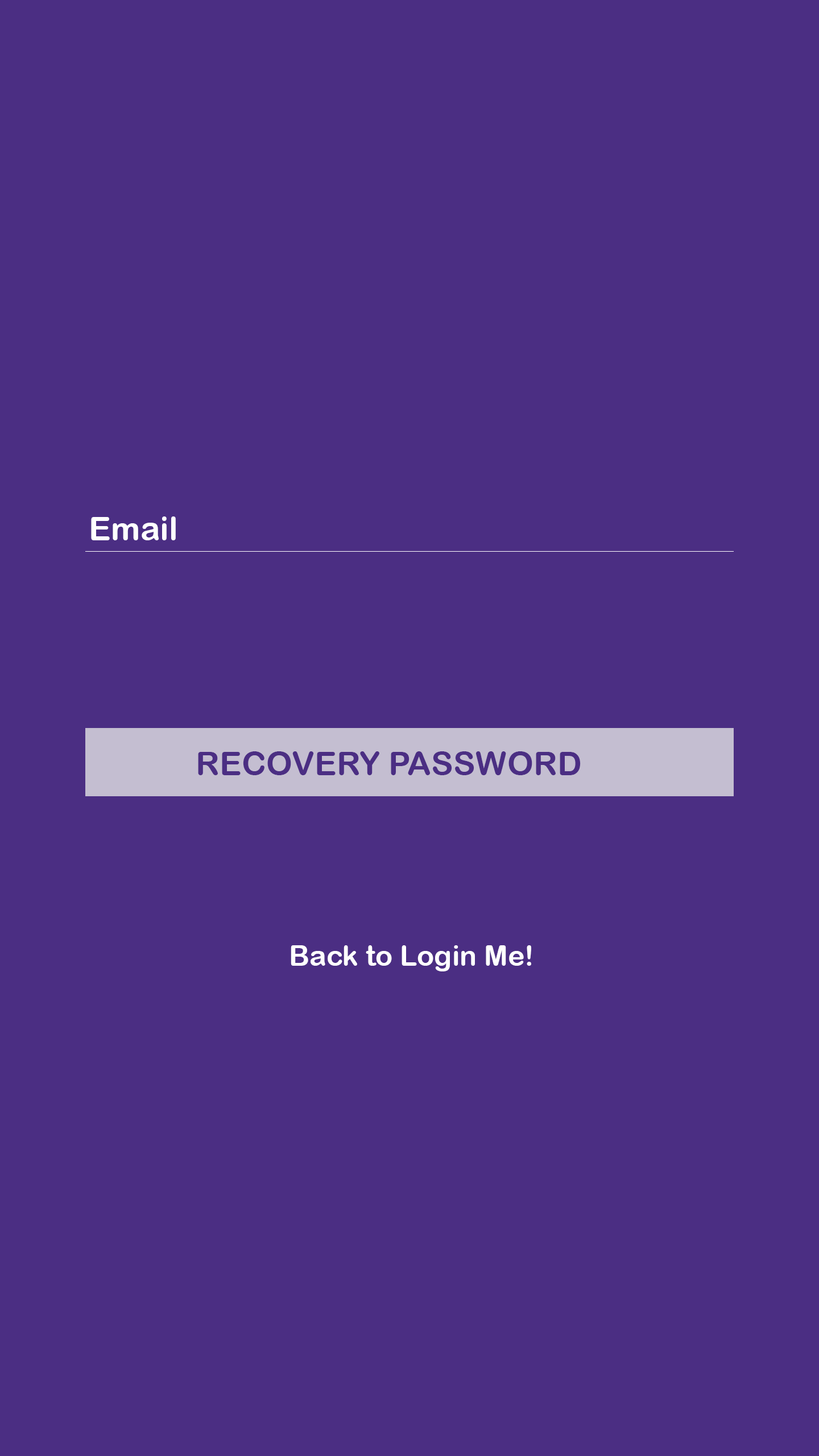
<style>
.page{position:relative;width:819px;height:1456px;background:#4b2e83}
.page>*{position:absolute;margin:0}
.t1{font:33.2px "ArialRoundedMTBold";color:#ffffff}
.t2{font:33.2px "ArialRoundedMTBold";color:#4b2e83}
.t3{font:28.4px "ArialRoundedMTBold";color:#ffffff}
</style>
<div class="page">
<p class="t1" style="left:91px;top:516px;width:85px;height:24px">Email</p>
<p class="t2" style="left:198px;top:751px;width:383px;height:24px">RECOVERY PASSWORD</p>
<p class="t3" style="left:291px;top:945px;width:240px;height:26px">Back to Login Me!</p>
</div>
